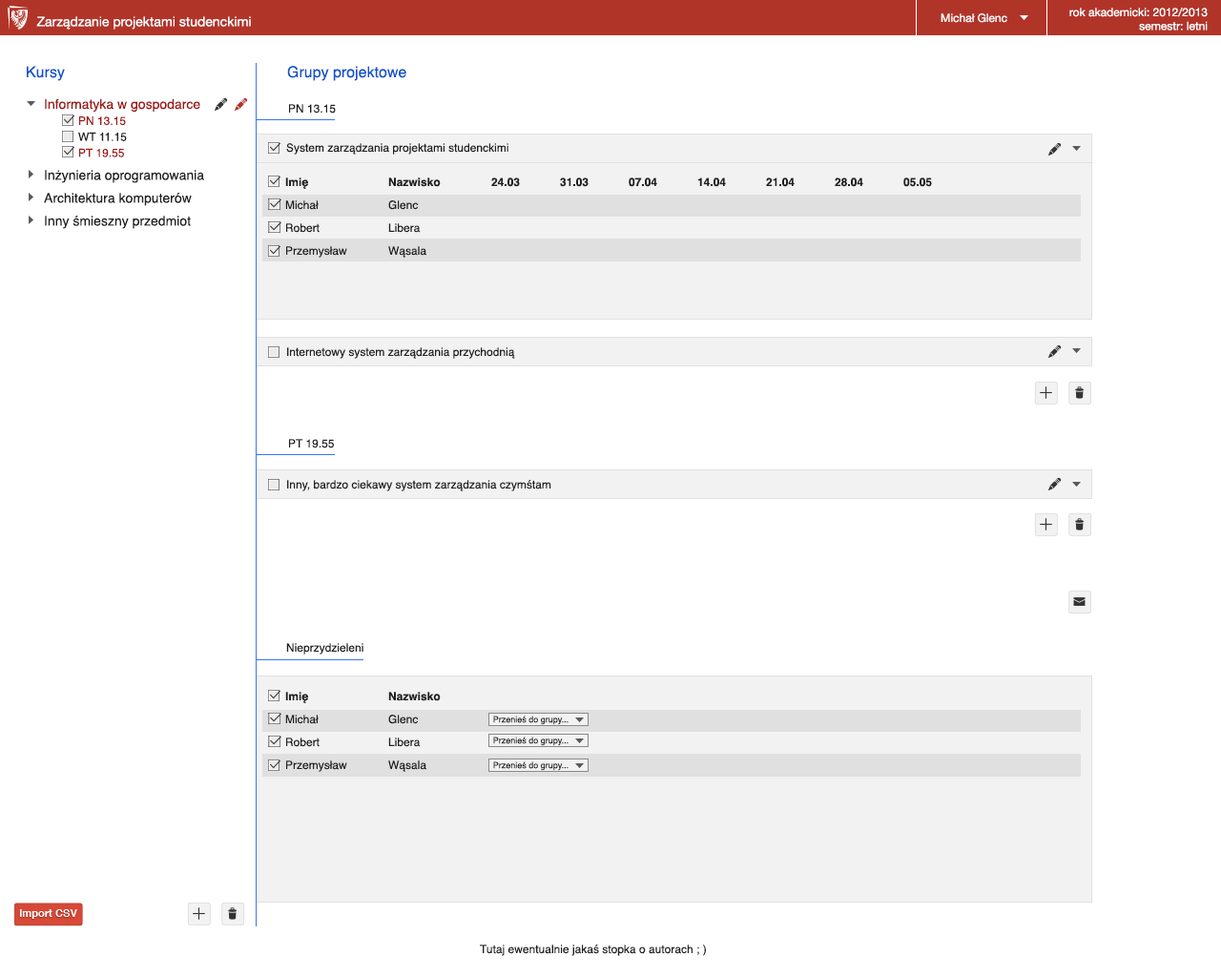
<style>
.page{position:relative;width:1221px;height:977px;background:#ffffff}
.page>*{position:absolute;margin:0}
.t1{font:13.4px "HelveticaNeue";color:#ffffff}
.t2{font:11.4px "HelveticaNeue";color:#ffffff}
.t3{font:15.3px "Helvetica";color:#1154cc}
.t4{font:13.4px/22.9px "Helvetica";color:#212121}
.t5{font:13.4px "Helvetica";color:#9e1715}
.t6{font:11.4px "Helvetica";color:#9e1715}
.t7{font:11.4px "Helvetica";color:#212121}
.t8{font:11.4px/22.9px "Helvetica-Bold";color:#212121}
.t9{font:11.4px/22.9px "Helvetica";color:#212121}
.t10{font:8.6px "Helvetica";color:#212121}
</style>
<div class="page">
<p class="t1" style="left:36px;top:16px;width:215px;height:14px">Zarządzanie projektami studenckimi</p>
<p class="t2" style="left:940px;top:13px;width:67px;height:10px">Michał Glenc</p>
<p class="t2" style="left:1069px;top:8px;width:139px;height:23px;text-align:right">rok akademicki: 2012/2013<br>semestr: letni</p>
<p class="t3" style="left:27px;top:66px;width:38px;height:15px">Kursy</p>
<p class="t3" style="left:287px;top:66px;width:119px;height:15px">Grupy projektowe</p>
<p class="t4" style="left:44px;top:98px;width:160px;height:131px"><span class="t5">Informatyka w gospodarce<br> </span><span class="t6">PN 13.15<br> </span><span class="t7">WT 11.15<br> </span><span class="t6">PT 19.55<br></span>Inżynieria oprogramowania<br>Architektura komputerów<br>Inny śmieszny przedmiot</p>
<p class="t7" style="left:289px;top:104px;width:47px;height:10px">PN 13.15</p>
<p class="t7" style="left:286px;top:143px;width:222px;height:12px">System zarządzania projektami studenckimi</p>
<p class="t8" style="left:285px;top:177px;width:647px;height:81px">Imię   Nazwisko  24.03  31.03  07.04  14.04  21.04  28.04  05.05  <br><span class="t9">Michał   Glenc   <br>Robert  Libera<br>Przemysław   Wąsala</span></p>
<p class="t7" style="left:287px;top:347px;width:228px;height:12px">Internetowy system zarządzania przychodnią</p>
<p class="t7" style="left:289px;top:439px;width:45px;height:9px">PT 19.55</p>
<p class="t7" style="left:287px;top:480px;width:264px;height:11px">Inny, bardzo ciekawy system zarządzania czymśtam</p>
<p class="t7" style="left:286px;top:643px;width:77px;height:11px">Nieprzydzieleni</p>
<p class="t9" style="left:285px;top:692px;width:156px;height:80px"><span class="t8">Imię   Nazwisko<br></span>Michał   Glenc   <br>Robert  Libera<br>Przemysław   Wąsala</p>
<p class="t10" style="left:493px;top:715px;width:75px;height:10px">Przenieś do grupy...</p>
<p class="t10" style="left:493px;top:736px;width:75px;height:10px">Przenieś do grupy...</p>
<p class="t10" style="left:493px;top:761px;width:75px;height:10px">Przenieś do grupy...</p>
<p class="t7" style="left:480px;top:944px;width:226px;height:12px">Tutaj ewentualnie jakaś stopka o autorach ; )</p>
</div>
